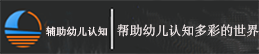
<style>
.page{position:relative;width:259px;height:54px;background:#292a2a}
.page>*{position:absolute;margin:0}
.t1{font:10.4px "SimSun";color:#f8f0f0}
.t2{font:13px "SimSun";color:#f8f0f0}
</style>
<div class="page">
<p class="t1" style="left:46px;top:26px;width:62px;height:11px">辅助幼儿认知</p>
<p class="t2" style="left:117px;top:24px;width:142px;height:13px">帮助幼儿认知多彩的世界</p>
</div>
